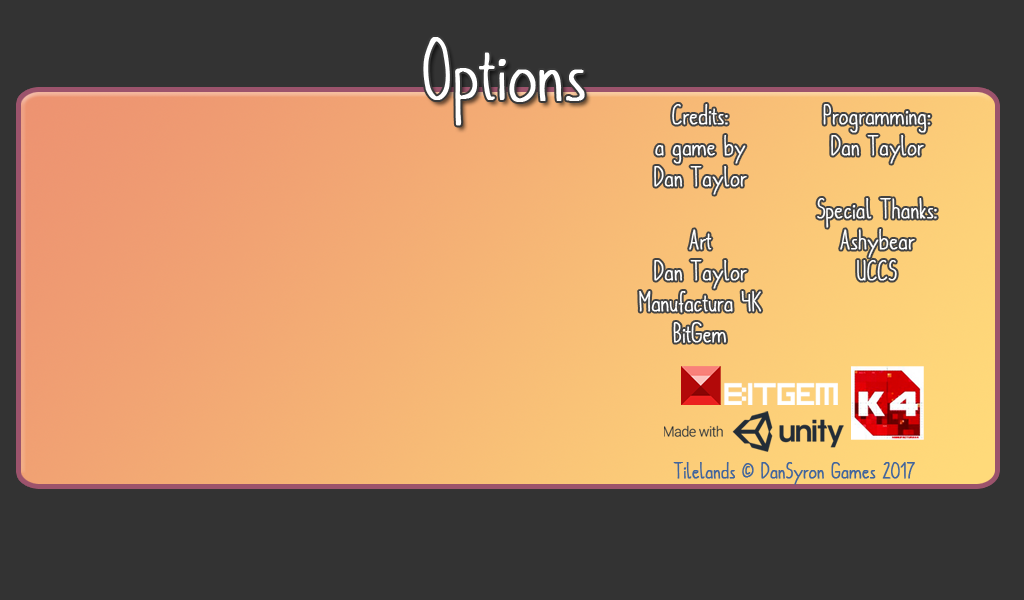
<style>
.page{position:relative;width:1024px;height:600px;background:#333333}
.page>*{position:absolute;margin:0}
.t1{font:80px "metafors-Regular";color:#ffffff;font-weight:bold}
.t2{font:26px "metafors-Regular";color:#ffffff;font-weight:bold}
.t3{font:22px "metafors-Regular";color:#42659d;font-weight:bold}
</style>
<div class="page">
<p class="t1" style="left:423px;top:37px;width:162px;height:89px">Options</p>
<p class="t2" style="left:639px;top:104px;width:123px;height:239px;text-align:center">Credits:<br>a game by<br>Dan Taylor<br><br>Art<br>Dan Taylor<br>Manufactura 4K<br>BitGem</p>
<p class="t2" style="left:817px;top:104px;width:120px;height:177px;text-align:center">Programming:<br>Dan Taylor<br><br>Special Thanks:<br>Ashybear<br>UCCS</p>
<p class="t3" style="left:673px;top:462px;width:242px;height:23px">Tilelands © DanSyron Games 2017</p>
</div>
